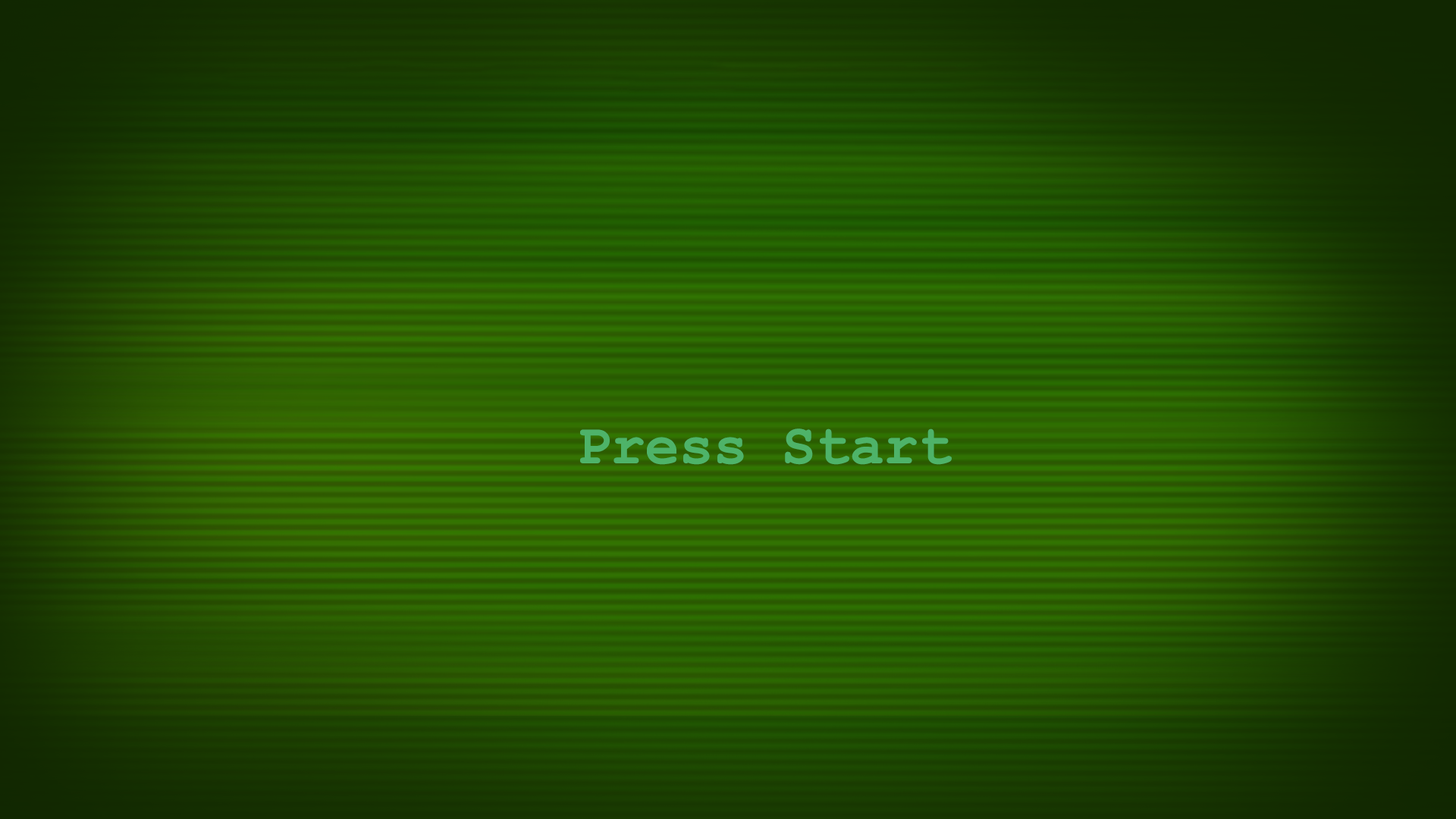
<style>
.page{position:relative;width:1456px;height:819px}
.page>*{position:absolute;margin:0}
.t1{font:56.9px "CourierNewPS-BoldMT";color:#4eb369}
</style>
<div class="page">
<p class="t1" style="left:580px;top:428px;width:372px;height:37px">Press Start</p>
</div>
